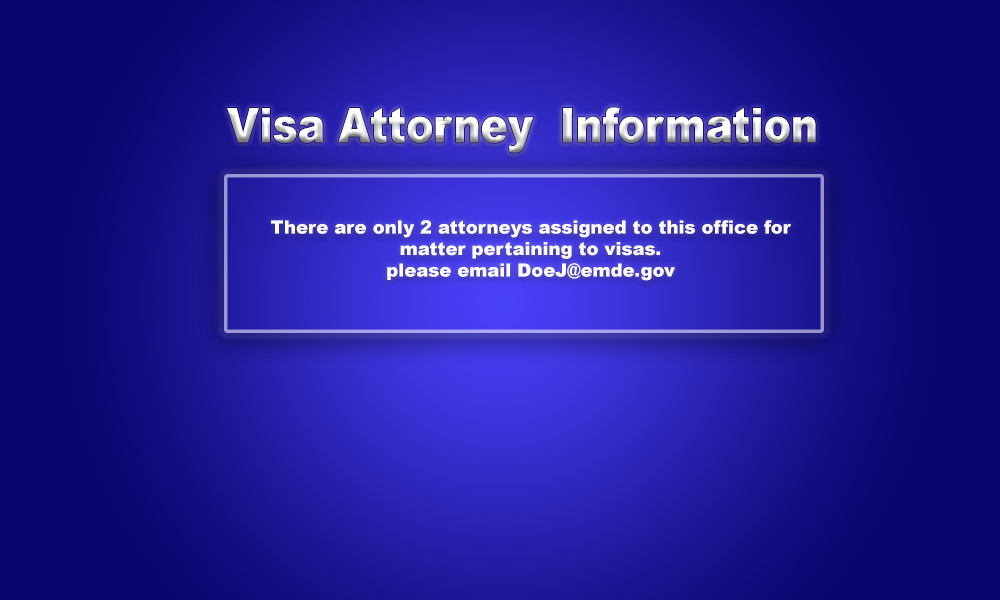
<style>
.page{position:relative;width:1000px;height:600px}
.page>*{position:absolute;margin:0}
.t1{font:48px "Arial-Black";scale:0.85 1}
.t2{font:18px "Arial-Black";color:#fbf8f8}
</style>
<div class="page">
<p class="t1" style="left:227px;top:107px;width:589px;height:46px">Visa Attorney  Information</p>
<p class="t2" style="left:271px;top:220px;width:520px;height:61px;text-align:center">There are only 2 attorneys assigned to this office for matter pertaining to visas.<br>please email DoeJ@emde.gov</p>
</div>
